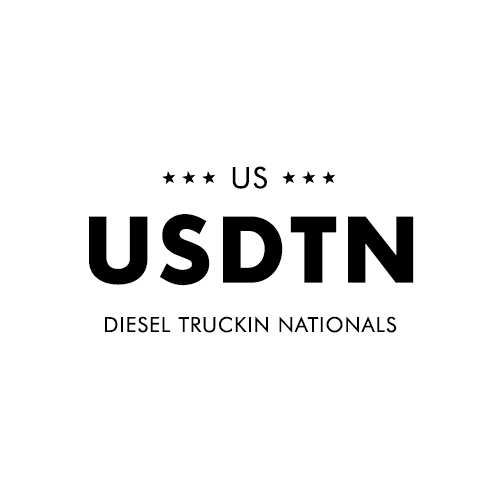
<style>
.page{position:relative;width:500px;height:500px;background:#ffffff}
.page>*{position:absolute;margin:0}
.t1{font:29.2px "FuturaBT-Book";letter-spacing:0.045em;color:#000000}
.t2{font:86.3px "FuturaMaxiCGBold";letter-spacing:0.045em;color:#000000}
.t3{font:20.8px "FuturaBT-Book";letter-spacing:0.045em;color:#000000}
</style>
<div class="page">
<p class="t1" style="left:232px;top:166px;width:35px;height:23px">US</p>
<p class="t2" style="left:89px;top:214px;width:325px;height:72px">USDTN</p>
<p class="t3" style="left:105px;top:316px;width:292px;height:17px">DIESEL TRUCKIN NATIONALS</p>
</div>
